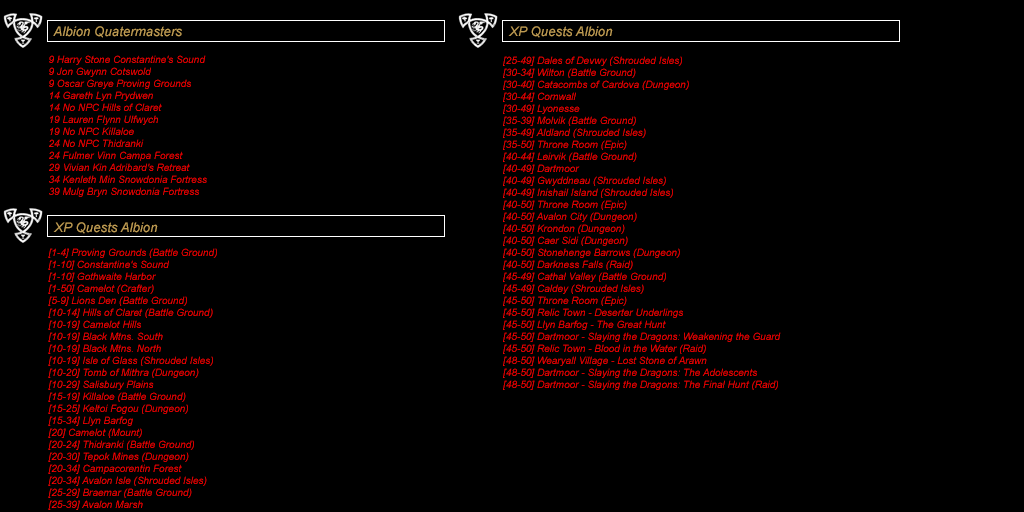
<style>
.page{position:relative;width:1024px;height:512px;background:#000000}
.page>*{position:absolute;margin:0}
.t1{font:13.3px "Arial-ItalicMT";color:#be9b53}
.t2{font:10px "Arial-ItalicMT";color:#ff0000}
</style>
<div class="page">
<p class="t1" style="left:53px;top:26px;width:129px;height:12px">Albion Quatermasters</p>
<p class="t1" style="left:508px;top:26px;width:105px;height:12px">XP Quests Albion</p>
<p class="t2" style="left:49px;top:55px;width:158px;height:142px">9 Harry Stone Constantine's Sound<br>9 Jon Gwynn Cotswold<br>9 Oscar Greye Proving Grounds<br>14 Gareth Lyn Prydwen<br>14 No NPC Hills of Claret<br>19 Lauren Flynn Ulfwych<br>19 No NPC Killaloe<br>24 No NPC Thidranki<br>24 Fulmer Vinn Campa Forest<br>29 Vivian Kin Adribard's Retreat<br>34 Kenleth Min Snowdonia Fortress<br>39 Mulg Bryn Snowdonia Fortress</p>
<p class="t2" style="left:503px;top:56px;width:278px;height:334px">[25-49] Dales of Devwy (Shrouded Isles)<br>[30-34] Wilton (Battle Ground)<br>[30-40] Catacombs of Cardova (Dungeon)<br>[30-44] Cornwall<br>[30-49] Lyonesse<br>[35-39] Molvik (Battle Ground)<br>[35-49] Aldland (Shrouded Isles)<br>[35-50] Throne Room (Epic)<br>[40-44] Leirvik (Battle Ground)<br>[40-49] Dartmoor<br>[40-49] Gwyddneau (Shrouded Isles)<br>[40-49] Inishail Island (Shrouded Isles)<br>[40-50] Throne Room (Epic)<br>[40-50] Avalon City (Dungeon)<br>[40-50] Krondon (Dungeon)<br>[40-50] Caer Sidi (Dungeon)<br>[40-50] Stonehenge Barrows (Dungeon)<br>[40-50] Darkness Falls (Raid)<br>[45-49] Cathal Valley (Battle Ground)<br>[45-49] Caldey (Shrouded Isles)<br>[45-50] Throne Room (Epic)<br>[45-50] Relic Town - Deserter Underlings<br>[45-50] Llyn Barfog - The Great Hunt<br>[45-50] Dartmoor - Slaying the Dragons: Weakening the Guard<br>[45-50] Relic Town - Blood in the Water (Raid)<br>[48-50] Wearyall Village - Lost Stone of Arawn<br>[48-50] Dartmoor - Slaying the Dragons: The Adolescents<br>[48-50] Dartmoor - Slaying the Dragons: The Final Hunt (Raid)</p>
<p class="t1" style="left:53px;top:222px;width:105px;height:12px">XP Quests Albion</p>
<p class="t2" style="left:48px;top:248px;width:169px;height:262px">[1-4] Proving Grounds (Battle Ground)<br>[1-10] Constantine's Sound<br>[1-10] Gothwaite Harbor<br>[1-50] Camelot (Crafter)<br>[5-9] Lions Den (Battle Ground)<br>[10-14] Hills of Claret (Battle Ground)<br>[10-19] Camelot Hills<br>[10-19] Black Mtns. South<br>[10-19] Black Mtns. North<br>[10-19] Isle of Glass (Shrouded Isles)<br>[10-20] Tomb of Mithra (Dungeon)<br>[10-29] Salisbury Plains<br>[15-19] Killaloe (Battle Ground)<br>[15-25] Keltoi Fogou (Dungeon)<br>[15-34] Llyn Barfog<br>[20] Camelot (Mount)<br>[20-24] Thidranki (Battle Ground)<br>[20-30] Tepok Mines (Dungeon)<br>[20-34] Campacorentin Forest<br>[20-34] Avalon Isle (Shrouded Isles)<br>[25-29] Braemar (Battle Ground)<br>[25-39] Avalon Marsh</p>
</div>
